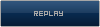
<style>
.page{position:relative;width:100px;height:27px}
.page>*{position:absolute;margin:0}
.t1{font:8px "04b03b";color:#a6a6a6}
</style>
<div class="page">
<p class="t1" style="left:34px;top:11px;width:29px;height:5px">REPLAY</p>
</div>
